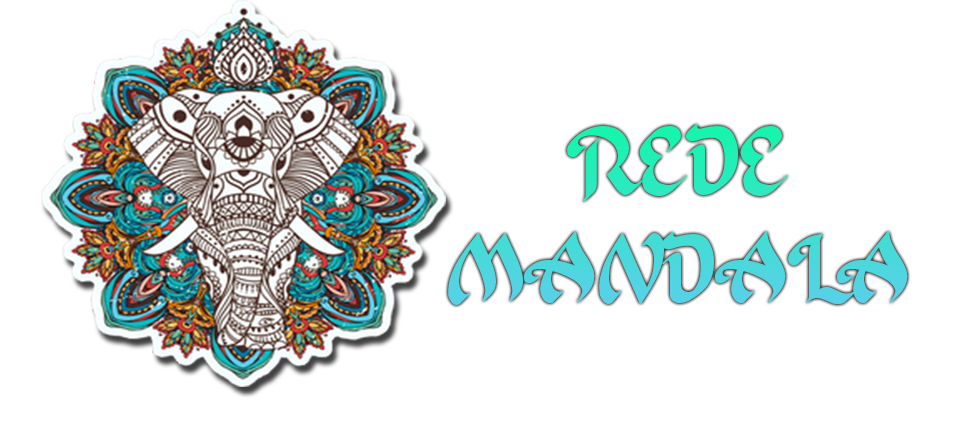
<style>
.page{position:relative;width:954px;height:426px;background:#ffffff}
.page>*{position:absolute;margin:0}
.t1{font:90px "Khaleefa"}
</style>
<div class="page">
<p class="t1" style="left:448px;top:124px;width:460px;height:181px;text-align:center">REDE <br>MANDALA</p>
</div>
